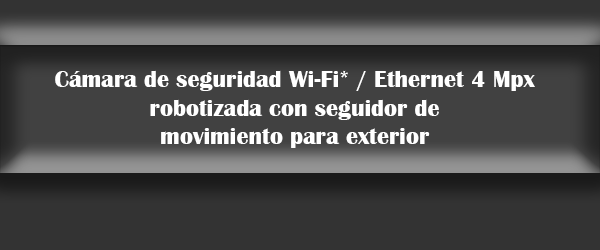
<style>
.page{position:relative;width:600px;height:250px;background:#333333}
.page>*{position:absolute;margin:0}
.t1{font:24px "BritannicBold";color:#ffffff}
</style>
<div class="page">
<p class="t1" style="left:55px;top:70px;width:480px;height:78px;text-align:center">Cámara de seguridad Wi-Fi* / Ethernet 4 Mpx robotizada con seguidor de <br>movimiento para exterior</p>
</div>
